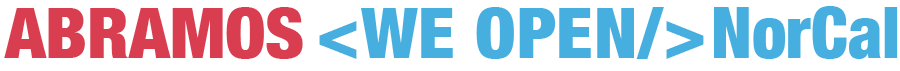
<style>
.page{position:relative;width:900px;height:71px;background:#ffffff}
.page>*{position:absolute;margin:0}
.t1{font:72.5px "HelveticaNeue-CondensedBlack";color:#46afdf;scale:0.95 1}
.t2{font:69.8px "HelveticaNeue-CondensedBlack";letter-spacing:0.01em;color:#46afdf;scale:1.05 1}
.t3{font:69.8px "HelveticaNeue-CondensedBlack";color:#d93d50;scale:1.05 1}
</style>
<div class="page">
<p class="t1" style="left:714px;top:6px;width:184px;height:53px">NorCal</p>
<p class="t2" style="left:4px;top:7px;width:700px;height:52px"><span class="t3">ABRAMOS </span>&lt;WE OPEN/&gt;</p>
</div>
